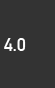
<style>
.page{position:relative;width:55px;height:88px;background:#333333}
.page>*{position:absolute;margin:0}
.t1{font:18px "DINAlternate-Bold";color:#ffffff}
</style>
<div class="page">
<p class="t1" style="left:4px;top:38px;width:22px;height:13px">4.0</p>
</div>
